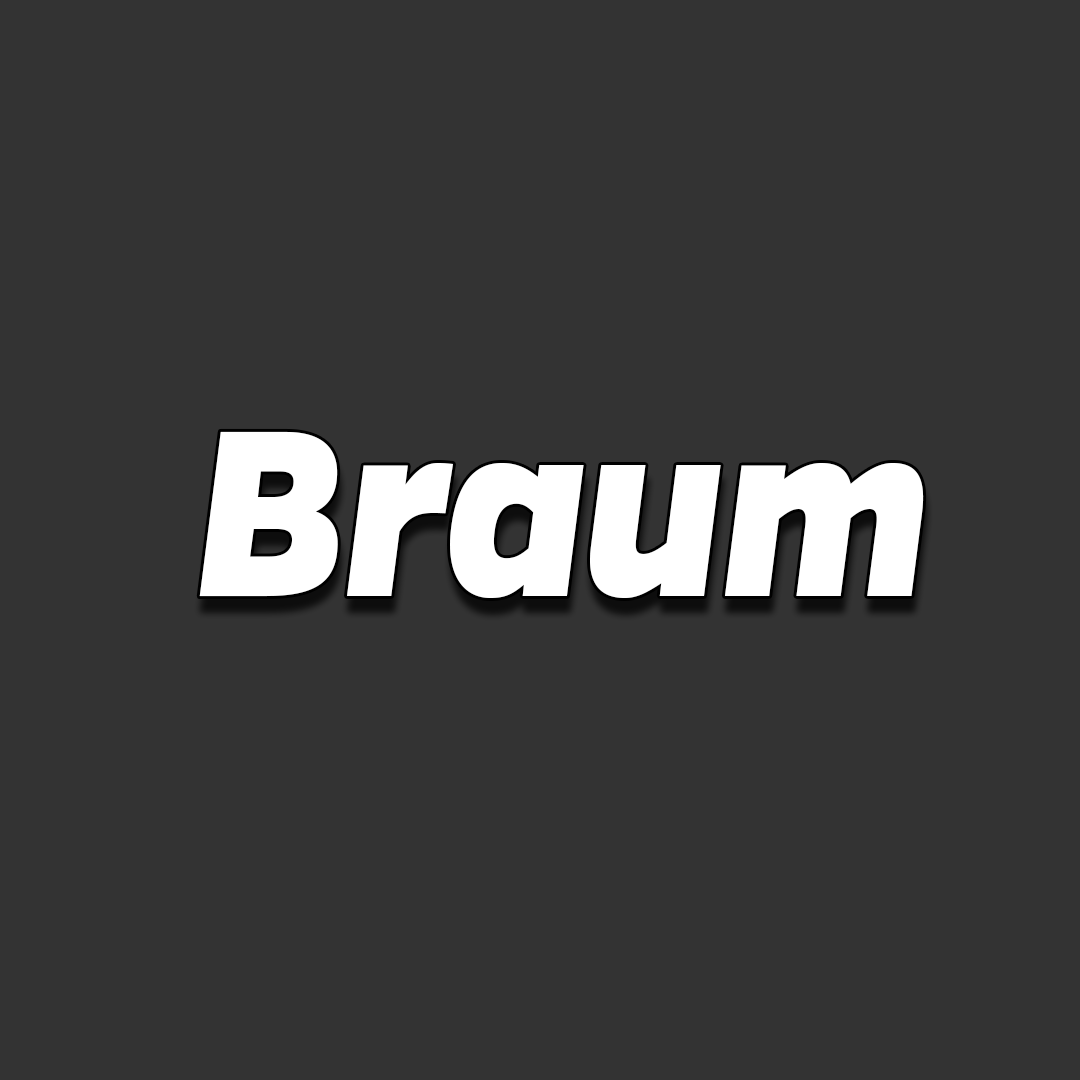
<style>
.page{position:relative;width:1080px;height:1080px;background:#333333}
.page>*{position:absolute;margin:0}
.t1{font:268px "Gentona-ExtraBoldItalicDEMO";color:#ffffff;scale:0.91 1}
</style>
<div class="page">
<p class="t1" style="left:199px;top:431px;width:725px;height:167px">Braum</p>
</div>
